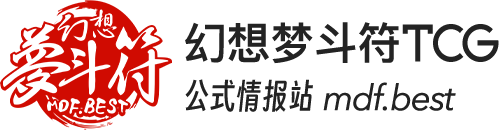
<style>
.page{position:relative;width:499px;height:130px;background:#ffffff}
.page>*{position:absolute;margin:0}
.t1{font:44px "PingFangSC-Semibold";color:#232323}
.t2{font:51px "404-CAI978";letter-spacing:-0.06em;color:#232323}
.t3{font:35.5px "AvenirNext-Italic";letter-spacing:-0.06em;color:#232323;font-weight:bold}
.t4{font:33px "SmileySans-Oblique";color:#232323}
</style>
<div class="page">
<p class="t1" style="left:185px;top:22px;width:314px;height:42px">幻想梦斗符<span class="t2">TCG</span></p>
<p class="t3" style="left:185px;top:79px;width:271px;height:33px"><span class="t4">公式情报站 </span>mdf.best</p>
</div>
